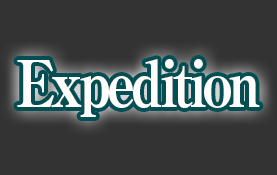
<style>
.page{position:relative;width:277px;height:175px;background:#333333}
.page>*{position:absolute;margin:0}
.t1{font:64px "RyuminPro-ExBold";letter-spacing:-0.08em;color:#fffdfc;scale:0.9 1}
</style>
<div class="page">
<p class="t1" style="left:17px;top:59px;width:243px;height:58px">Expedition</p>
</div>
